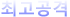
<style>
.page{position:relative;width:70px;height:17px;background:#ffffff}
.page>*{position:absolute;margin:0}
.t1{font:17px "MalgunGothicBold"}
</style>
<div class="page">
<p class="t1" style="left:1px;top:0px;width:66px;height:17px">최고공격</p>
</div>
